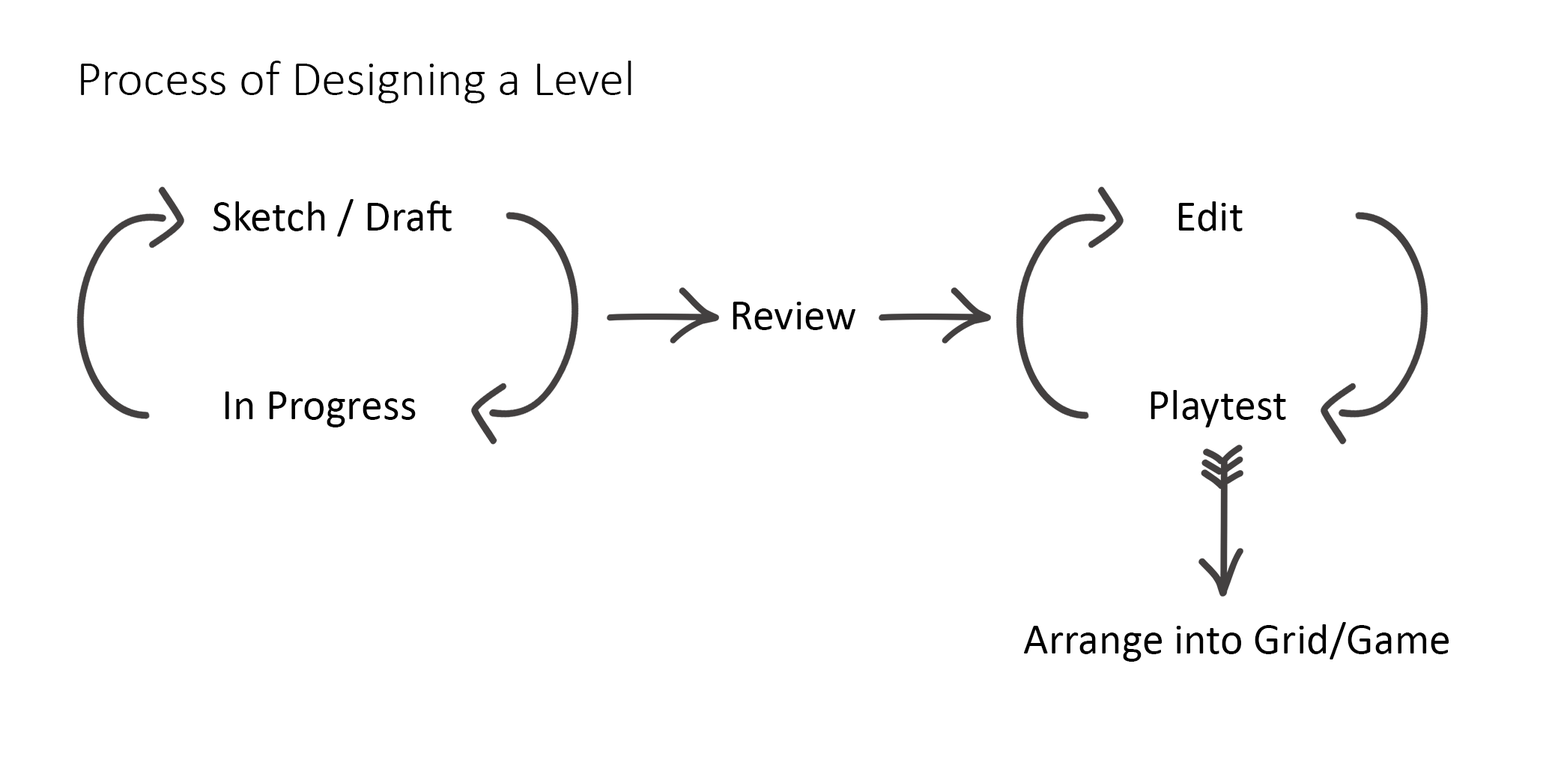
<style>
.page{position:relative;width:1558px;height:765px;background:#ffffff}
.page>*{position:absolute;margin:0}
.t1{font:49.9px "Calibri-Light";color:#000000}
.t2{font:43.7px "Calibri";color:#000000}
</style>
<div class="page">
<p class="t1" style="left:81px;top:61px;width:550px;height:42px">Process of Designing a Level</p>
<p class="t2" style="left:213px;top:199px;width:239px;height:38px">Sketch / Draft</p>
<p class="t2" style="left:1178px;top:201px;width:65px;height:30px">Edit</p>
<p class="t2" style="left:732px;top:302px;width:123px;height:28px">Review</p>
<p class="t2" style="left:225px;top:392px;width:191px;height:36px">In Progress</p>
<p class="t2" style="left:1150px;top:390px;width:136px;height:38px">Playtest</p>
<p class="t2" style="left:1024px;top:622px;width:425px;height:40px">Arrange into Grid/Game</p>
</div>
